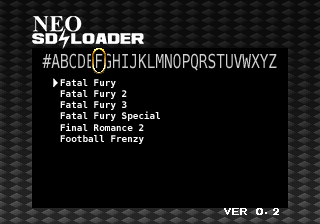
<style>
.page{position:relative;width:320px;height:224px;background:#000000}
.page>*{position:absolute;margin:0}
.t1{font:19.3px "BitstreamVeraSansMono-Roman";color:#cfcfcf;scale:0.75 1}
.t2{font:9.3px "BitstreamVeraSansMono-Bold";color:#ffffff}
</style>
<div class="page">
<p class="t1" style="left:42px;top:53px;width:235px;height:18px">#ABCDEFGHIJKLMNOPQRSTUVWXYZ</p>
<p class="t2" style="left:60px;top:79px;width:100px;height:65px">Fatal Fury<br>Fatal Fury 2<br>Fatal Fury 3<br>Fatal Fury Special<br>Final Romance 2<br>Football Frenzy</p>
</div>
